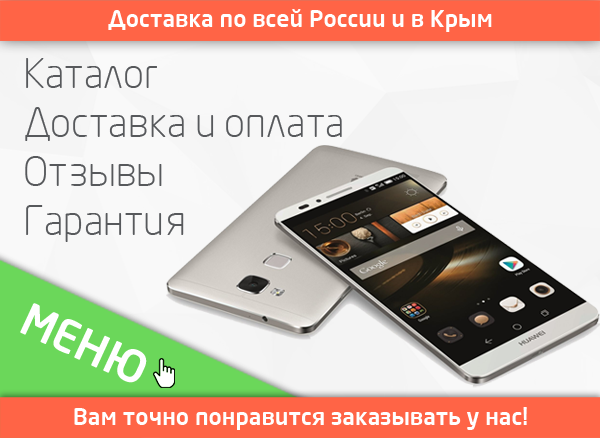
<style>
.page{position:relative;width:600px;height:438px}
.page>*{position:absolute;margin:0}
.t1{font:23.1px "NeoSansCyr-Medium";color:#ffffff}
.t2{font:40.1px/49px "NeoSansCyr-LIght";color:#57595c}
.t3{font:44.1px "NeoSansCyr-Medium";color:#ffffff}
</style>
<div class="page">
<p class="t1" style="left:108px;top:9px;width:384px;height:23px">Доставка по всей России и в Крым</p>
<p class="t2" style="left:25px;top:58px;width:317px;height:184px">Каталог<br>Доставка и оплата<br>Отзывы<br>Гарантия</p>
<p class="t3" style="left:20px;top:303px;width:127px;height:80px;rotate:25deg">МЕНЮ</p>
<p class="t1" style="left:74px;top:407px;width:453px;height:23px">Вам точно понравится заказывать у нас!</p>
</div>
